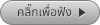
<style>
.page{position:relative;width:100px;height:25px}
.page>*{position:absolute;margin:0}
.t1{font:12px "NotoSansThai-Regular";color:#373737}
</style>
<div class="page">
<p class="t1" style="left:18px;top:4px;width:54px;height:12px">คลิ๊กเพื่อฟัง</p>
</div>
